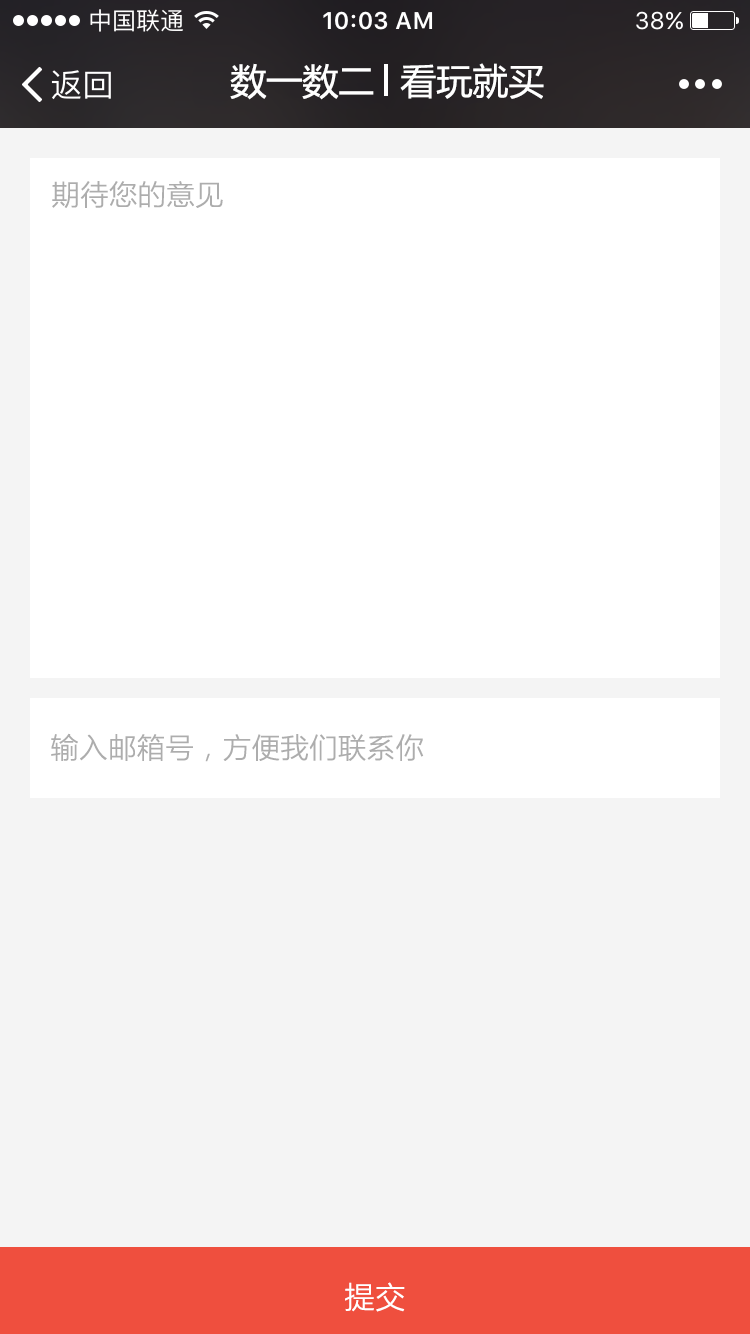
<style>
.page{position:relative;width:750px;height:1334px;background:#ffffff}
.page>*{position:absolute;margin:0}
.t1{font:36px "MicrosoftYaHei";color:#ffffff}
.t2{font:28px "MicrosoftYaHeiLight";color:#adadad;font-weight:bold}
.t3{font:30px "MicrosoftYaHeiLight";color:#ffffff;font-weight:bold}
</style>
<div class="page">
<p class="t1" style="left:230px;top:63px;width:144px;height:37px">数一数二</p>
<p class="t1" style="left:400px;top:63px;width:144px;height:36px">看玩就买</p>
<p class="t2" style="left:52px;top:181px;width:171px;height:27px">期待您的意见</p>
<p class="t2" style="left:51px;top:733px;width:373px;height:29px">输入邮箱号，方便我们联系你</p>
<p class="t3" style="left:345px;top:1282px;width:60px;height:30px">提交</p>
</div>
